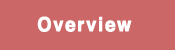
<style>
.page{position:relative;width:175px;height:50px;background:#cc6767}
.page>*{position:absolute;margin:0}
.t1{font:19.4px "Helvetica-Bold";letter-spacing:0.08em;color:#ffffff;font-weight:bold;scale:0.93 1}
</style>
<div class="page">
<p class="t1" style="left:37px;top:16px;width:95px;height:16px">Overview</p>
</div>
